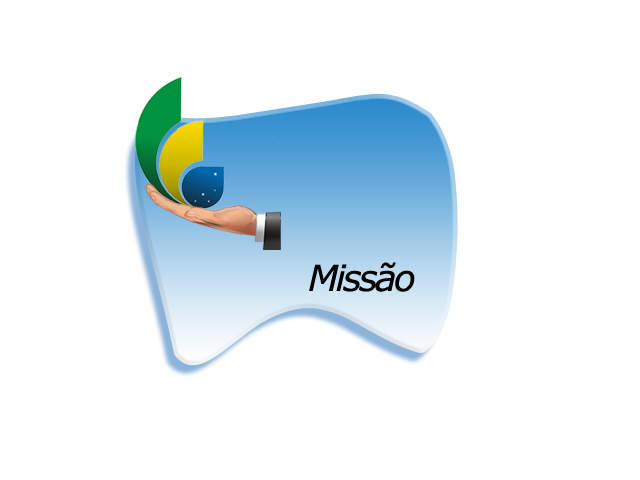
<style>
.page{position:relative;width:640px;height:480px;background:#ffffff}
.page>*{position:absolute;margin:0}
.t1{font:36px "Verdana-Italic";letter-spacing:-0.075em;color:#000000}
</style>
<div class="page">
<p class="t1" style="left:309px;top:262px;width:106px;height:30px">Missão</p>
</div>
